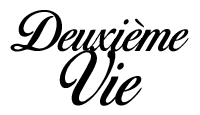
<style>
.page{position:relative;width:200px;height:115px;background:#ffffff}
.page>*{position:absolute;margin:0}
.t1{font:49px/54.4px "BirdsofParadise-PersonaluseOnly";color:#000000}
.t2{font:65.3px/54.4px "BirdsofParadise-PersonaluseOnly";color:#000000}
</style>
<div class="page">
<p class="t1" style="left:10px;top:10px;width:179px;height:96px;text-align:center">Deuxième<br><span class="t2">Vie</span></p>
</div>
